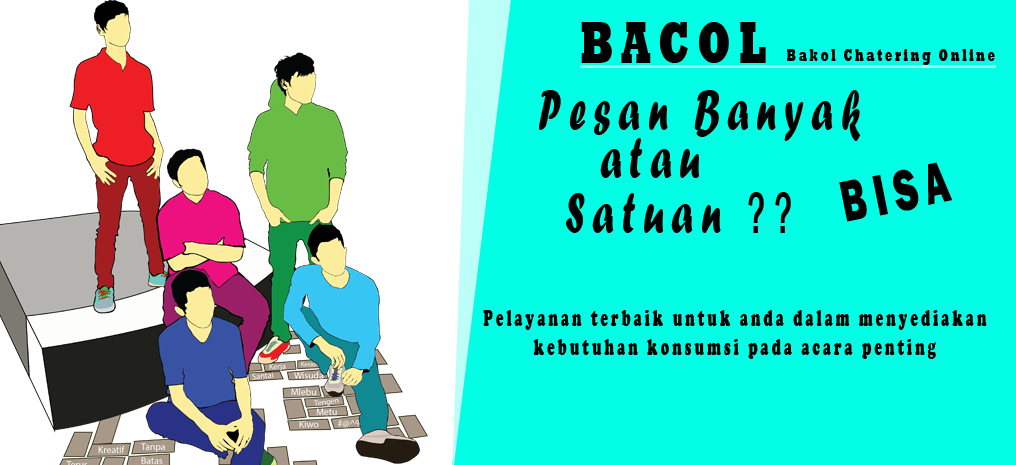
<style>
.page{position:relative;width:1016px;height:465px;background:#00ffe4}
.page>*{position:absolute;margin:0}
.t1{font:60px "Rockwell-ExtraBold";letter-spacing:0.2em;color:#000000;scale:0.65 1}
.t2{font:17.6px "Rockwell-ExtraBold";letter-spacing:0.2em;color:#000000;scale:0.65 1}
.t3{font:60px "ForteMT";letter-spacing:0.2em;color:#000000;scale:0.65 1}
.t4{font:60px "FranklinGothic-Heavy";letter-spacing:0.2em;color:#000000;scale:0.65 1}
.t5{font:60px "FranklinGothic-MediumCond";letter-spacing:0.2em;color:#000000;scale:0.65 1}
.t6{font:24px "CooperBlack";letter-spacing:0.2em;color:#000000;scale:0.6 1}
</style>
<div class="page">
<p class="t1" style="left:581px;top:22px;width:185px;height:41px">BACOL</p>
<p class="t2" style="left:787px;top:49px;width:208px;height:16px">Bakol Chatering Online</p>
<p class="t3" style="left:539px;top:90px;width:322px;height:51px">Pesan Banyak</p>
<p class="t3" style="left:600px;top:138px;width:99px;height:40px">atau</p>
<p class="t4" style="left:839px;top:162px;width:114px;height:60px;rotate:-11deg">BISA</p>
<p class="t3" style="left:565px;top:192px;width:226px;height:41px">Satuan <span class="t5">??</span></p>
<p class="t6" style="left:483px;top:310px;width:504px;height:49px;text-align:center">Pelayanan terbaik untuk anda dalam menyediakan<br>kebutuhan konsumsi pada acara penting</p>
</div>
